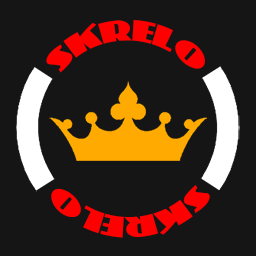
<style>
.page{position:relative;width:256px;height:256px;background:#151515}
.page>*{position:absolute;margin:0}
.t1{font:26px "PhattPhreddy";color:#ff0000}
</style>
<div class="page">
<p class="t1" style="left:46px;top:20px;width:159px;height:53px">SKRELO</p>
<p class="t1" style="left:51px;top:185px;width:159px;height:53px;rotate:180deg">SKRELO</p>
</div>
